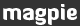
<style>
.page{position:relative;width:80px;height:26px;background:#333333}
.page>*{position:absolute;margin:0}
.t1{font:22px "DiavloBlack-Regular";color:#ffffff}
</style>
<div class="page">
<p class="t1" style="left:3px;top:4px;width:74px;height:21px">magpie</p>
</div>
